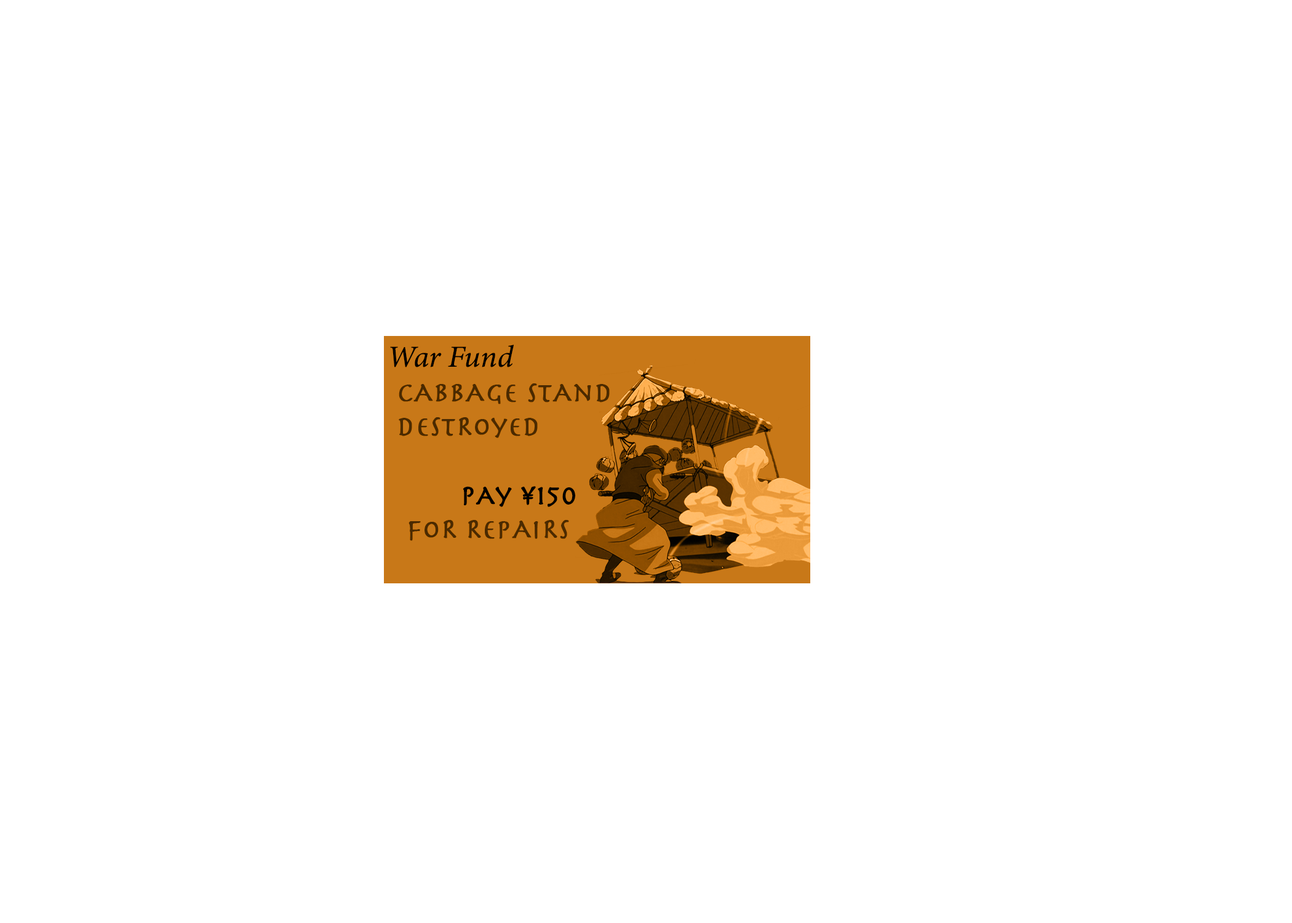
<style>
.page{position:relative;width:1292px;height:923px;background:#ffffff}
.page>*{position:absolute;margin:0}
.t1{font:30.8px "MinionConceptItalic-MediumItalic";color:#000000;font-weight:bold}
.t2{font:28.2px "Herculanum";color:#4d310e;font-weight:bold}
.t3{font:28.2px "Herculanum";color:#000000;font-weight:bold}
</style>
<div class="page">
<p class="t1" style="left:390px;top:345px;width:124px;height:22px">War Fund</p>
<p class="t2" style="left:399px;top:383px;width:211px;height:55px">cAbbAge stAnd <br>destRoyed</p>
<p class="t3" style="left:463px;top:486px;width:112px;height:21px">pAy ¥150</p>
<p class="t2" style="left:409px;top:520px;width:160px;height:21px"><span class="t3"> <br></span>foR RepAiRs</p>
</div>
